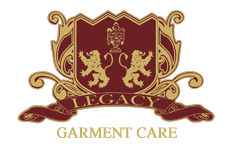
<style>
.page{position:relative;width:230px;height:150px;background:#ffffff}
.page>*{position:absolute;margin:0}
.t1{font:14.8px "Times-Roman";color:#cab065;font-weight:bold}
</style>
<div class="page">
<p class="t1" style="left:57px;top:127px;width:121px;height:11px">GARMENT CARE</p>
</div>
